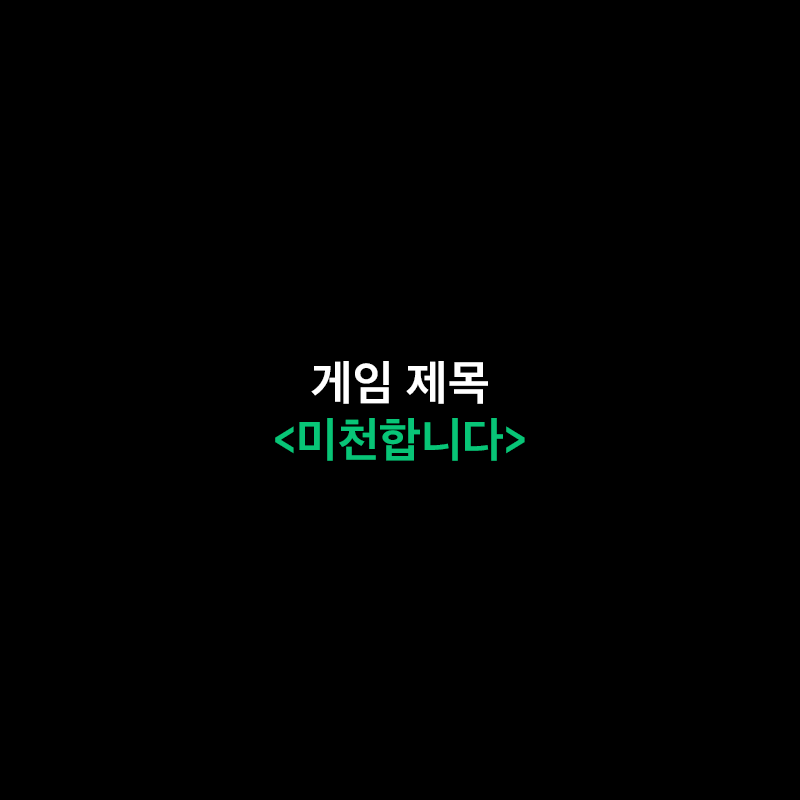
<style>
.page{position:relative;width:800px;height:800px;background:#000000}
.page>*{position:absolute;margin:0}
.t1{font:48px "AppleSDGothicNeoB00";color:#08c577}
.t2{font:48px "AppleSDGothicNeoB00";color:#ffffff}
</style>
<div class="page">
<p class="t1" style="left:275px;top:361px;width:250px;height:100px;text-align:center"><span class="t2">게임 제목<br></span>&lt;미천합니다&gt;</p>
</div>
